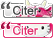
<style>
.page{position:relative;width:54px;height:40px;background:#ffffff}
.page>*{position:absolute;margin:0}
.t1{font:12px "ArialMT";color:#454545}
.t2{font:12px "ArialMT";color:#e2336f}
</style>
<div class="page">
<p class="t1" style="left:13px;top:5px;width:25px;height:10px">Citer</p>
<p class="t2" style="left:13px;top:25px;width:25px;height:10px">Citer</p>
</div>
